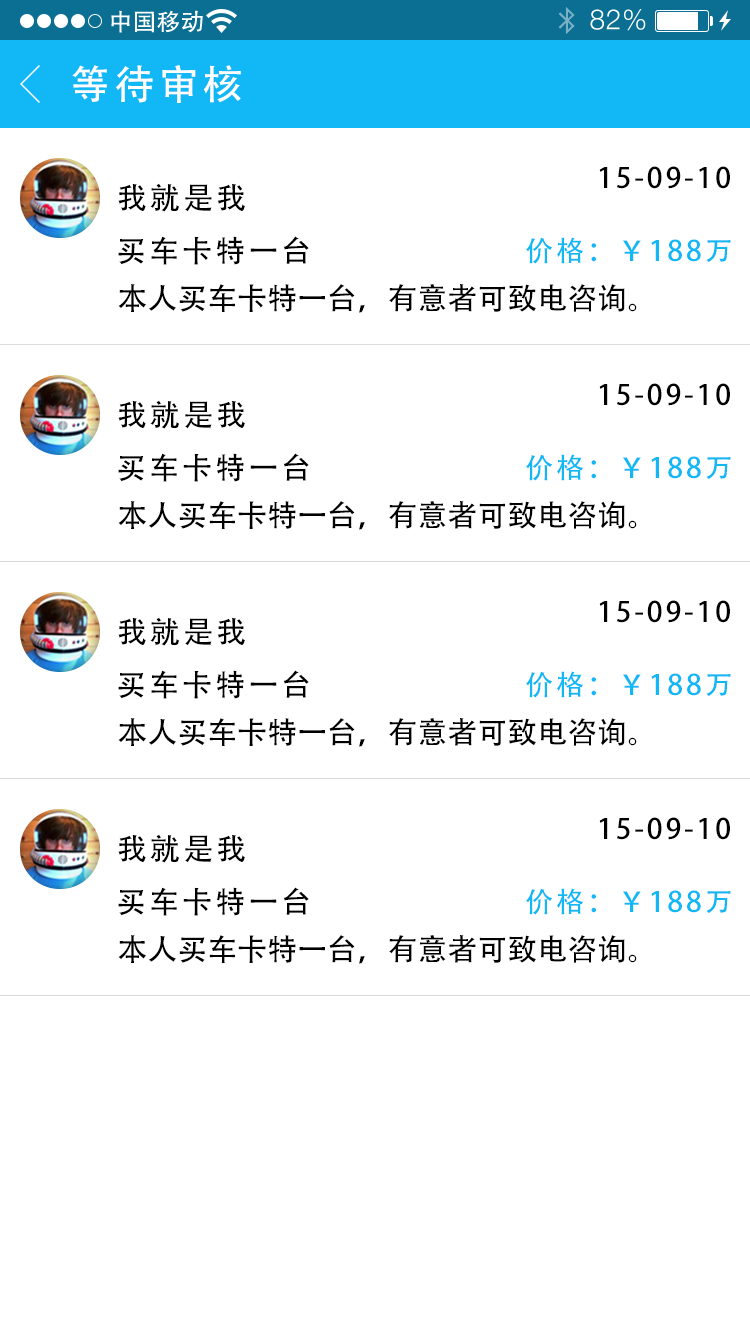
<style>
.page{position:relative;width:750px;height:1334px;background:#ffffff}
.page>*{position:absolute;margin:0}
.t1{font:40px "AdobeHeitiStd-Regular";letter-spacing:0.104em;color:#ffffff}
.t2{font:28px "AdobeHeitiStd-Regular";letter-spacing:0.104em;color:#000000}
.t3{font:30px "AdobeHeitiStd-Regular";letter-spacing:0.104em;color:#000000}
.t4{font:28px "AdobeHeitiStd-Regular";letter-spacing:0.104em;color:#12b8f6}
.t5{font:30px "AdobeHeitiStd-Regular";color:#000000}
</style>
<div class="page">
<p class="t1" style="left:72px;top:65px;width:169px;height:38px">等待审核</p>
<p class="t2" style="left:599px;top:166px;width:131px;height:23px">15-09-10</p>
<p class="t3" style="left:118px;top:183px;width:127px;height:29px">我就是我</p>
<p class="t3" style="left:118px;top:236px;width:191px;height:29px">买车卡特一台</p>
<p class="t4" style="left:526px;top:237px;width:205px;height:27px">价格：￥188万</p>
<p class="t5" style="left:118px;top:284px;width:519px;height:29px">本人买车卡特一台，有意者可致电咨询。</p>
<p class="t2" style="left:599px;top:383px;width:131px;height:23px">15-09-10</p>
<p class="t3" style="left:118px;top:400px;width:127px;height:29px">我就是我</p>
<p class="t3" style="left:118px;top:453px;width:191px;height:29px">买车卡特一台</p>
<p class="t4" style="left:526px;top:454px;width:205px;height:27px">价格：￥188万</p>
<p class="t5" style="left:118px;top:501px;width:519px;height:29px">本人买车卡特一台，有意者可致电咨询。</p>
<p class="t2" style="left:599px;top:600px;width:131px;height:23px">15-09-10</p>
<p class="t3" style="left:118px;top:617px;width:127px;height:29px">我就是我</p>
<p class="t3" style="left:118px;top:670px;width:191px;height:29px">买车卡特一台</p>
<p class="t4" style="left:526px;top:671px;width:205px;height:27px">价格：￥188万</p>
<p class="t5" style="left:118px;top:718px;width:519px;height:29px">本人买车卡特一台，有意者可致电咨询。</p>
<p class="t2" style="left:599px;top:817px;width:131px;height:23px">15-09-10</p>
<p class="t3" style="left:118px;top:834px;width:127px;height:29px">我就是我</p>
<p class="t3" style="left:118px;top:887px;width:191px;height:29px">买车卡特一台</p>
<p class="t4" style="left:526px;top:888px;width:205px;height:27px">价格：￥188万</p>
<p class="t5" style="left:118px;top:935px;width:519px;height:29px">本人买车卡特一台，有意者可致电咨询。</p>
</div>
